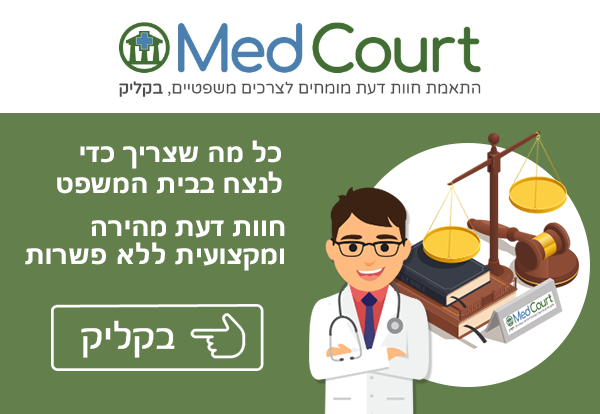
<style>
.page{position:relative;width:600px;height:414px;background:#637f4b}
.page>*{position:absolute;margin:0}
.t1{font:26px/31.5px "SegoeUI-Bold";color:#ffffff}
.t2{font:26px/27.6px "SegoeUI-Bold";color:#ffffff}
</style>
<div class="page">
<p class="t1" style="left:57px;top:140px;width:225px;height:54px;text-align:right">כל מה שצריך כדי<br> לנצח בבית המשפט</p>
<p class="t2" style="left:25px;top:220px;width:260px;height:51px;text-align:right">חוות דעת מהירה<br> ומקצועית ללא פשרות</p>
</div>
